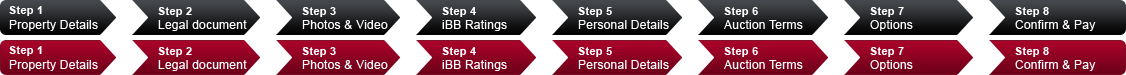
<style>
.page{position:relative;width:1126px;height:75px;background:#ffffff}
.page>*{position:absolute;margin:0}
.t1{font:12px/15px "ArialMT";letter-spacing:0.02em;color:#ffffff}
.t2{font:11px/15px "Arial-BoldMT";letter-spacing:0.02em;color:#ffffff}
.t3{font:12px "ArialMT";letter-spacing:0.02em;color:#ffffff}
.t4{font:11px "Arial-BoldMT";letter-spacing:0.02em;color:#ffffff}
</style>
<div class="page">
<p class="t1" style="left:9px;top:6px;width:89px;height:25px"><span class="t2">Step 1<br></span>Property Details</p>
<p class="t3" style="left:158px;top:7px;width:89px;height:24px"><span class="t4">Step 2<br></span>Legal document</p>
<p class="t3" style="left:302px;top:7px;width:86px;height:22px"><span class="t4">Step 3<br></span>Photos &amp; Video</p>
<p class="t3" style="left:442px;top:7px;width:65px;height:24px"><span class="t4">Step 4<br></span>iBB Ratings</p>
<p class="t3" style="left:578px;top:7px;width:91px;height:22px"><span class="t4">Step 5<br></span>Personal Details</p>
<p class="t3" style="left:724px;top:7px;width:79px;height:22px"><span class="t4">Step 6<br></span>Auction Terms</p>
<p class="t3" style="left:870px;top:7px;width:43px;height:24px"><span class="t4">Step 7<br></span>Options</p>
<p class="t3" style="left:1015px;top:7px;width:81px;height:24px"><span class="t4">Step 8<br></span>Confirm &amp; Pay</p>
<p class="t1" style="left:9px;top:46px;width:89px;height:25px"><span class="t2">Step 1<br></span>Property Details</p>
<p class="t3" style="left:158px;top:47px;width:89px;height:24px"><span class="t4">Step 2<br></span>Legal document</p>
<p class="t3" style="left:302px;top:47px;width:86px;height:22px"><span class="t4">Step 3<br></span>Photos &amp; Video</p>
<p class="t3" style="left:442px;top:47px;width:65px;height:24px"><span class="t4">Step 4<br></span>iBB Ratings</p>
<p class="t3" style="left:578px;top:47px;width:91px;height:22px"><span class="t4">Step 5<br></span>Personal Details</p>
<p class="t3" style="left:724px;top:47px;width:79px;height:22px"><span class="t4">Step 6<br></span>Auction Terms</p>
<p class="t3" style="left:870px;top:47px;width:43px;height:24px"><span class="t4">Step 7<br></span>Options</p>
<p class="t3" style="left:1015px;top:47px;width:81px;height:24px"><span class="t4">Step 8<br></span>Confirm &amp; Pay</p>
</div>
